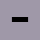
<style>
.page{position:relative;width:40px;height:40px;background:#9f98a8}
.page>*{position:absolute;margin:0}
.t1{font:60px "ArialMT";color:#000000}
</style>
<div class="page">
<p class="t1" style="left:11px;top:17px;width:18px;height:5px">-</p>
</div>
